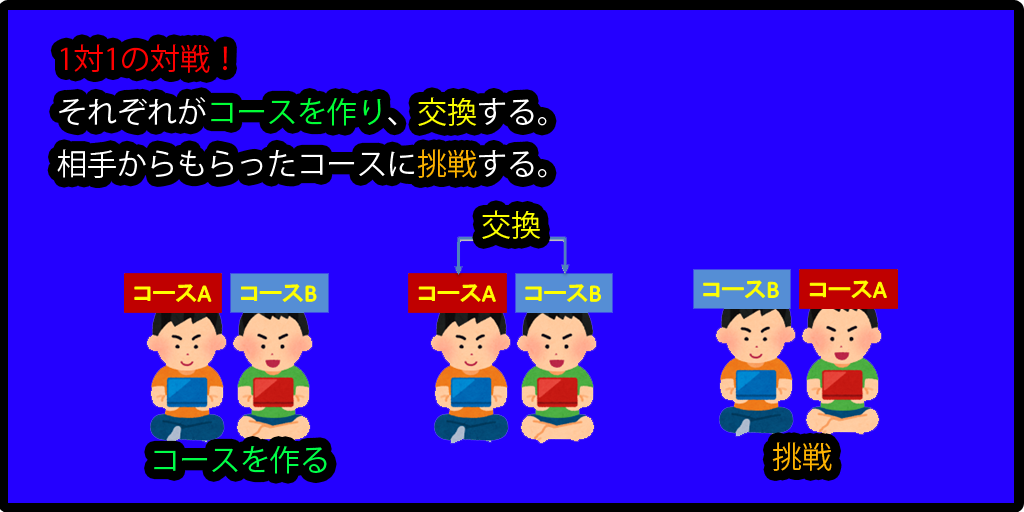
<style>
.page{position:relative;width:1024px;height:512px;background:#2400ff}
.page>*{position:absolute;margin:0}
.t1{font:30px "KozGoPro-Regular";color:#ffffff}
.t2{font:30px "KozGoPro-Regular";color:#ff0000}
.t3{font:30px "KozGoPro-Regular";color:#00ff36}
.t4{font:30px "KozGoPro-Regular";color:#fcff00}
.t5{font:30px "KozGoPro-Regular";color:#ffb400}
.t6{font:30px "KozGoPro-Regular";color:#00ff48}
</style>
<div class="page">
<p class="t1" style="left:57px;top:44px;width:490px;height:134px"><span class="t2">1対1の対戦！<br></span>それぞれが<span class="t3">コースを作り</span>、<span class="t4">交換</span>する。<br>相手からもらったコースに<span class="t5">挑戦</span>する。</p>
<p class="t4" style="left:482px;top:210px;width:59px;height:29px">交換</p>
<p class="t6" style="left:154px;top:446px;width:173px;height:28px">コースを作る</p>
<p class="t5" style="left:772px;top:442px;width:60px;height:29px">挑戦</p>
</div>
